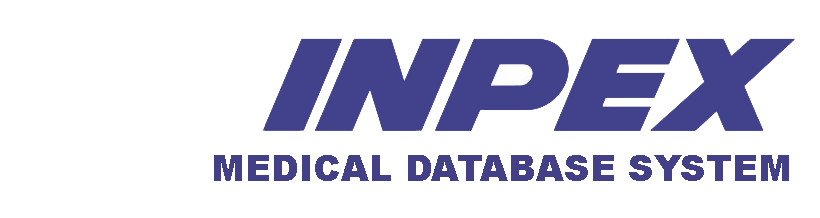
<style>
.page{position:relative;width:820px;height:218px;background:#ffffff}
.page>*{position:absolute;margin:0}
.t1{font:36px "Arial-Black";color:#444088}
</style>
<div class="page">
<p class="t1" style="left:214px;top:155px;width:575px;height:26px">MEDICAL DATABASE SYSTEM</p>
</div>
